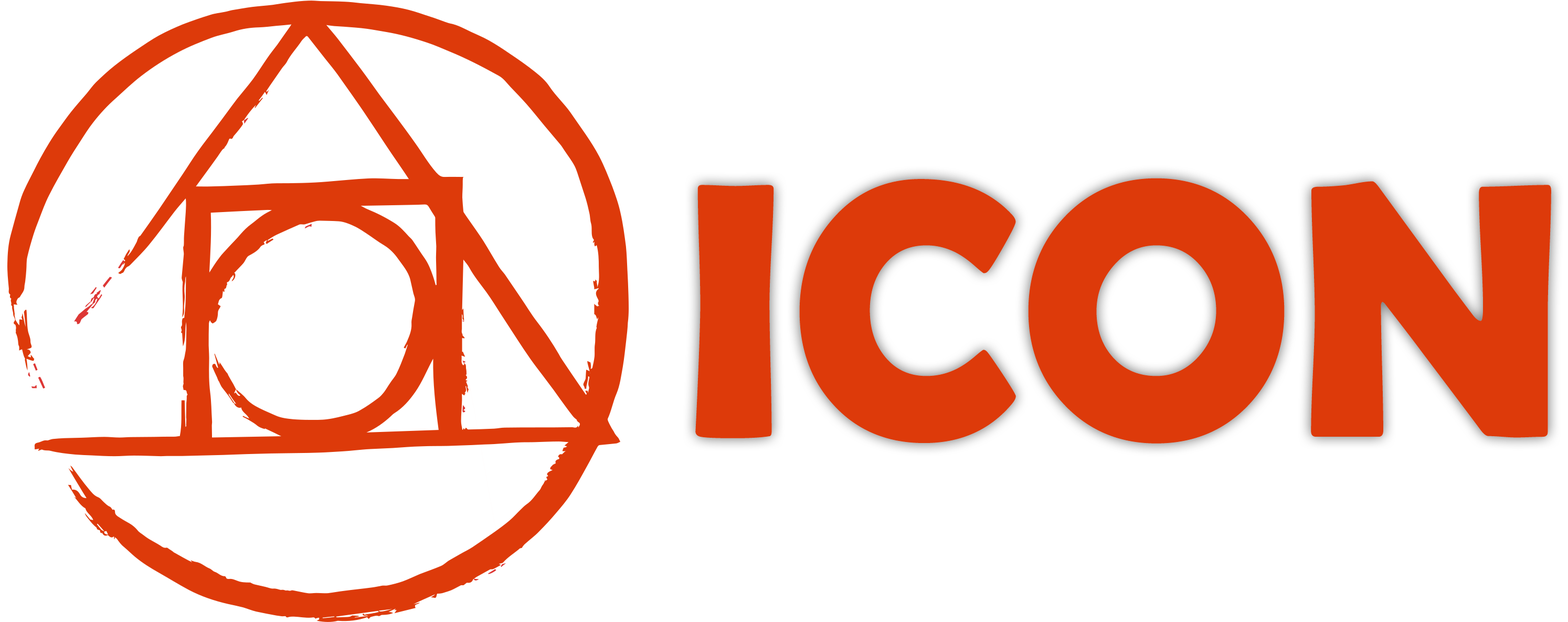
<style>
.page{position:relative;width:1568px;height:622px;background:#ffffff}
.page>*{position:absolute;margin:0}
.t1{font:367.3px "BerlinSansFBDemi-Bold";color:#dd3a0a}
</style>
<div class="page">
<p class="t1" style="left:695px;top:178px;width:856px;height:265px">ICON</p>
</div>
